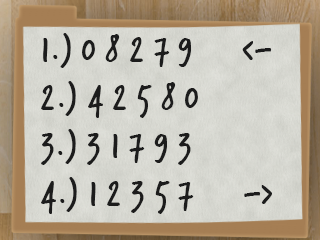
<style>
.page{position:relative;width:320px;height:240px}
.page>*{position:absolute;margin:0}
.t1{font:40px/48px "TrashHand";color:#1c1c1c}
</style>
<div class="page">
<p class="t1" style="left:41px;top:33px;width:231px;height:181px">1.) 0 8 2 7 9     &lt;-<br>2.) 4 2 5 8 0<br>3.) 3 1 7 9 3<br>4.) 1 2 3 5 7     -&gt;</p>
</div>
